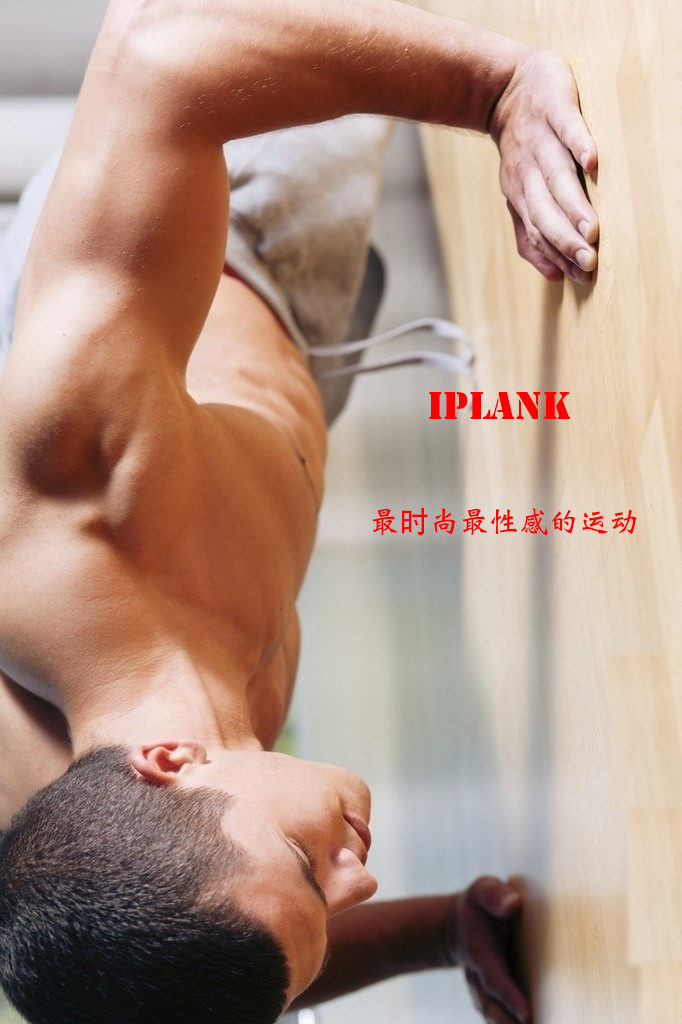
<style>
.page{position:relative;width:682px;height:1024px}
.page>*{position:absolute;margin:0}
.t1{font:36px "StencilStd";color:#fa0000}
.t2{font:30px "Weibei-TC-Bold";color:#fa0000}
.t3{font:30px "AdobeHeitiStd-Regular";color:#fa0000}
</style>
<div class="page">
<p class="t1" style="left:429px;top:392px;width:142px;height:27px">IPLANK</p>
<p class="t2" style="left:372px;top:507px;width:265px;height:29px">最<span class="t3">时</span>尚最性感的运动</p>
</div>
